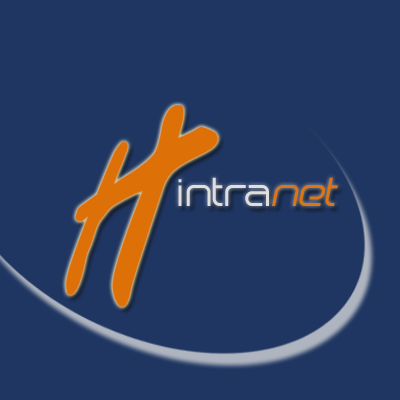
<style>
.page{position:relative;width:400px;height:400px;background:#1f3662}
.page>*{position:absolute;margin:0}
.t1{font:36px "Birdman";color:#dfdfdf}
.t2{font:36px "BirdmanOblique";color:#df7512}
</style>
<div class="page">
<p class="t1" style="left:178px;top:177px;width:160px;height:29px">intra<span class="t2">net</span></p>
</div>
